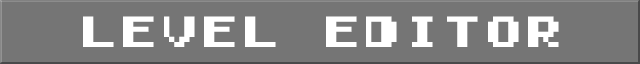
<style>
.page{position:relative;width:640px;height:64px;background:#757575}
.page>*{position:absolute;margin:0}
.t1{font:40.5px "GamegirlClassic";color:#ffffff}
</style>
<div class="page">
<p class="t1" style="left:83px;top:16px;width:476px;height:31px">level editor</p>
</div>
